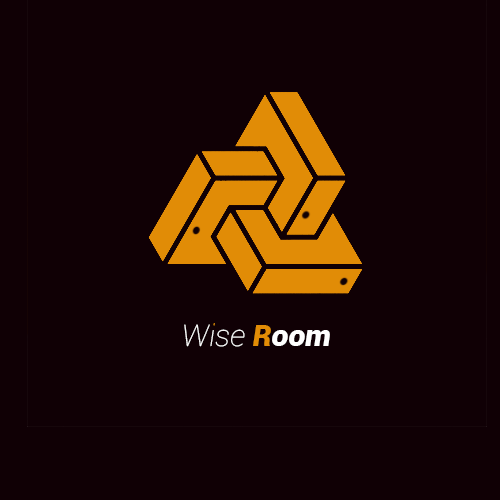
<style>
.page{position:relative;width:500px;height:500px;background:#100005}
.page>*{position:absolute;margin:0}
.t1{font:30px "Roboto-ThinItalic";color:#ffffff}
.t2{font:30px "Roboto-BlackItalic";color:#e18c06}
.t3{font:30px "Roboto-BlackItalic";color:#ffffff}
</style>
<div class="page">
<p class="t1" style="left:184px;top:323px;width:146px;height:24px">Wise <span class="t2">R</span><span class="t3">oom</span></p>
</div>
